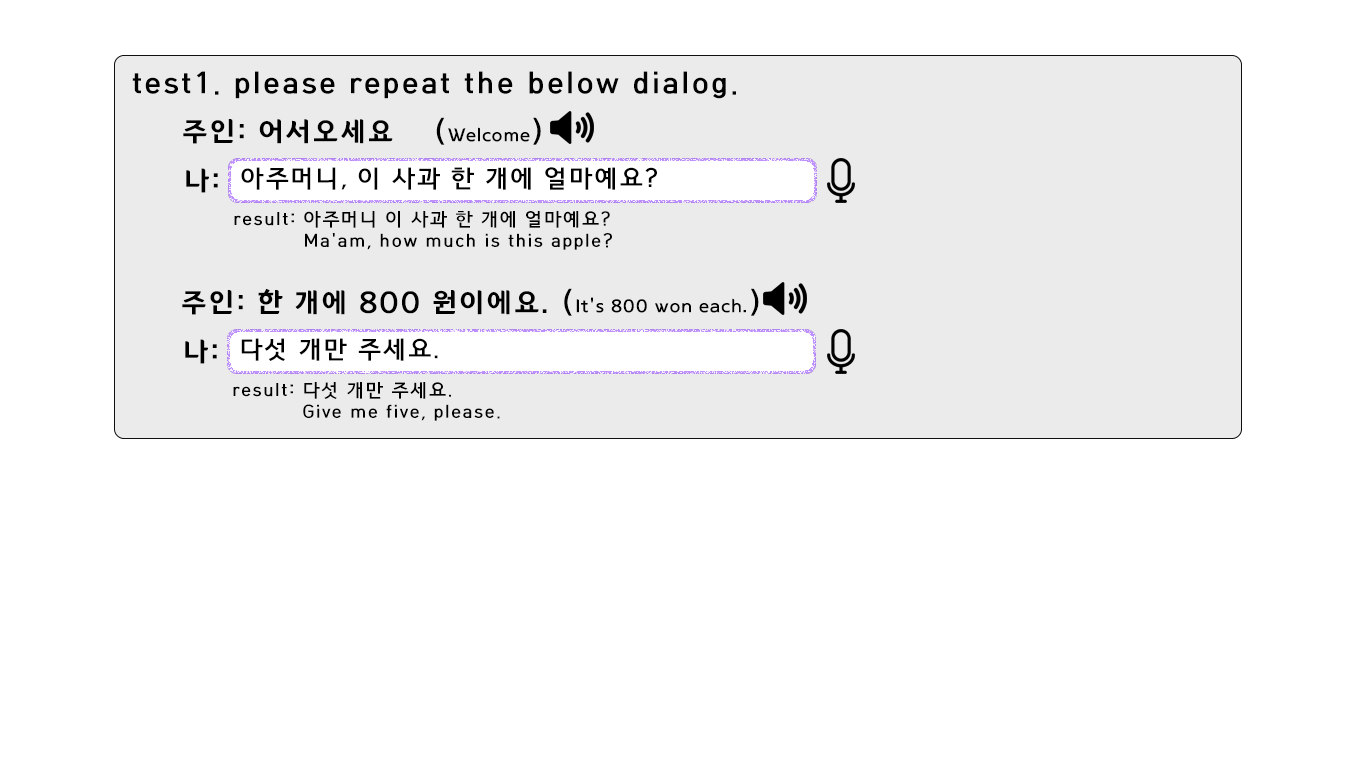
<style>
.page{position:relative;width:1366px;height:768px;background:#ffffff}
.page>*{position:absolute;margin:0}
.t1{font:30px "HCRDotum-Bold";letter-spacing:0.075em;color:#000000}
.t2{font:30px "YiSunShinDotumB";letter-spacing:0.075em;color:#000000}
.t3{font:18px "YiSunShinDotumB";letter-spacing:0.075em;color:#000000}
.t4{font:24px "HCRDotum-Bold";letter-spacing:0.075em;color:#000000}
.t5{font:18px "HCRDotum-Bold";letter-spacing:0.075em;color:#000000}
</style>
<div class="page">
<p class="t1" style="left:132px;top:71px;width:604px;height:28px">test1. please repeat the below dialog.</p>
<p class="t2" style="left:183px;top:117px;width:358px;height:28px">주인: 어서오세요    (<span class="t3">Welcome</span>)</p>
<p class="t2" style="left:186px;top:168px;width:32px;height:25px">나:</p>
<p class="t4" style="left:241px;top:167px;width:416px;height:23px">아주머니, 이 사과 한 개에 얼마예요?</p>
<p class="t5" style="left:234px;top:211px;width:376px;height:17px">result: 아주머니 이 사과 한 개에 얼마예요?</p>
<p class="t5" style="left:305px;top:233px;width:307px;height:17px">Ma'am, how much is this apple?</p>
<p class="t2" style="left:182px;top:288px;width:577px;height:28px">주인: 한 개에 800 원이에요. (<span class="t3">It's 800 won each.</span>)</p>
<p class="t2" style="left:185px;top:339px;width:32px;height:25px">나:</p>
<p class="t4" style="left:241px;top:338px;width:197px;height:23px">다섯 개만 주세요.</p>
<p class="t5" style="left:233px;top:382px;width:218px;height:17px">result: 다섯 개만 주세요.</p>
<p class="t5" style="left:303px;top:404px;width:197px;height:17px">Give me five, please.</p>
</div>
